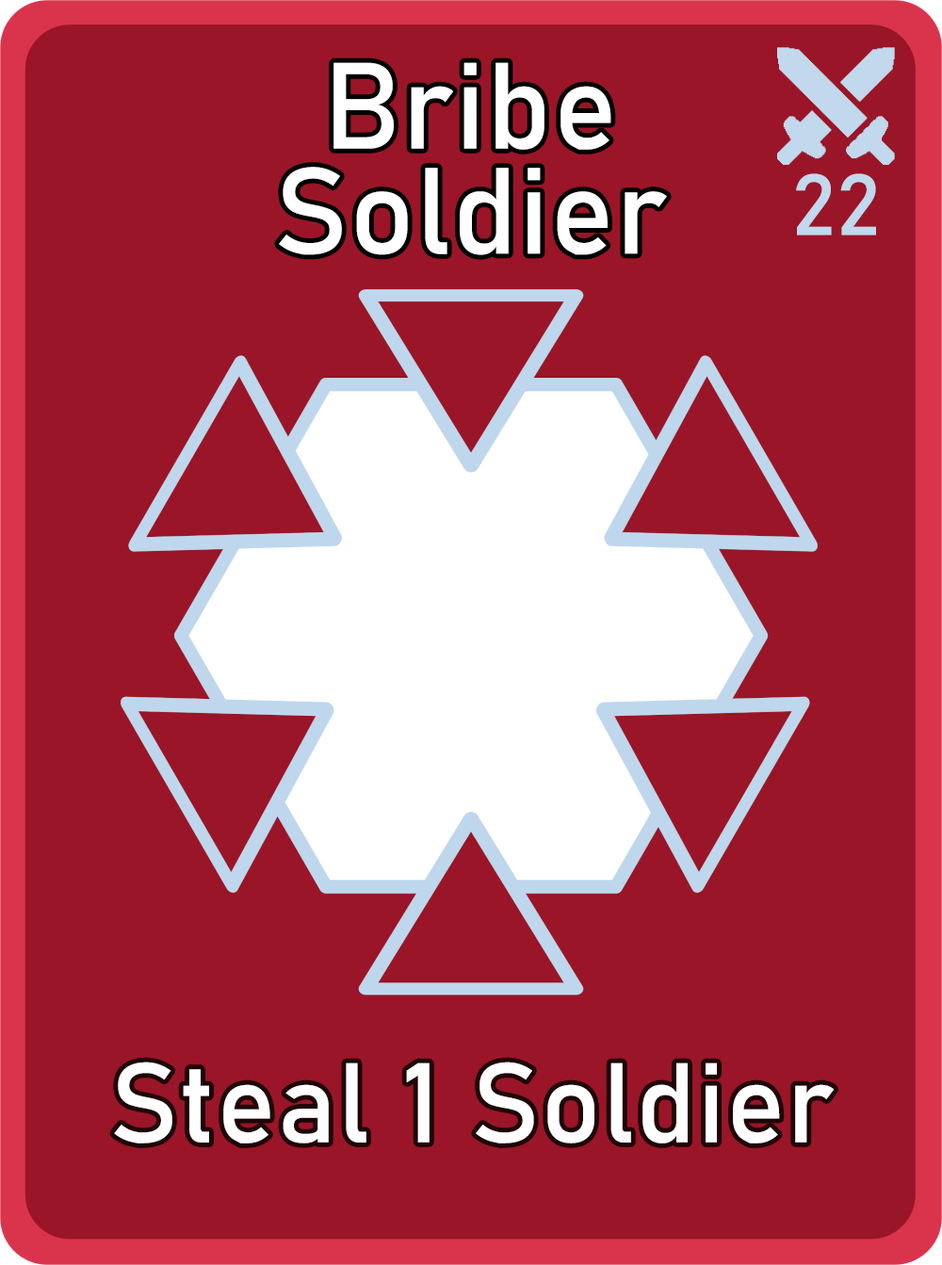
<style>
.page{position:relative;width:942px;height:1265px;background:#9a1527}
.page>*{position:absolute;margin:0}
.t1{font:120.6px/105.1px "Bahnschrift";letter-spacing:0.01em;color:#ffffff}
.t2{font:85px "Bahnschrift";letter-spacing:0.01em;color:#c1d8ed}
.t3{font:111.3px "Bahnschrift";letter-spacing:0.01em;color:#ffffff}
</style>
<div class="page">
<p class="t1" style="left:279px;top:62px;width:388px;height:193px;text-align:center">Bribe<br>Soldier</p>
<p class="t2" style="left:796px;top:173px;width:80px;height:63px">22</p>
<p class="t3" style="left:114px;top:1062px;width:720px;height:82px">Steal 1 Soldier</p>
</div>
